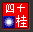
<style>
.page{position:relative;width:33px;height:32px;background:#f20000}
.page>*{position:absolute;margin:0}
.t1{font:10.4px "SimSun";color:#ffffff}
.t2{font:11.7px "SimSun";color:#ffffff}
</style>
<div class="page">
<p class="t1" style="left:6px;top:4px;width:19px;height:9px">四十</p>
<p class="t2" style="left:16px;top:15px;width:11px;height:12px">桂</p>
</div>
